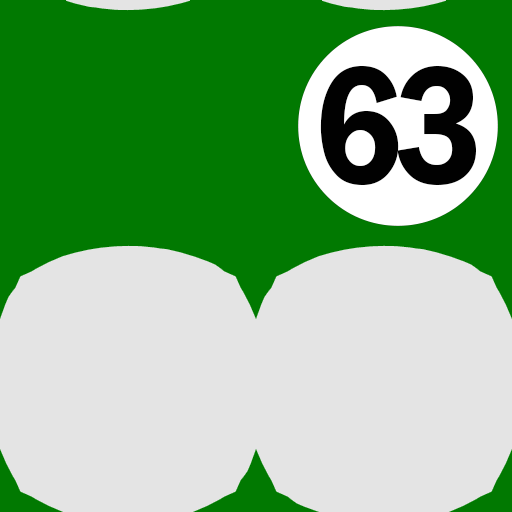
<style>
.page{position:relative;width:512px;height:512px;background:#e4e4e4}
.page>*{position:absolute;margin:0}
.t1{font:172.5px "FranklinGothic-Demi";letter-spacing:-0.05em;color:#010101;scale:0.87 1}
</style>
<div class="page">
<p class="t1" style="left:320px;top:66px;width:156px;height:119px">63</p>
</div>
